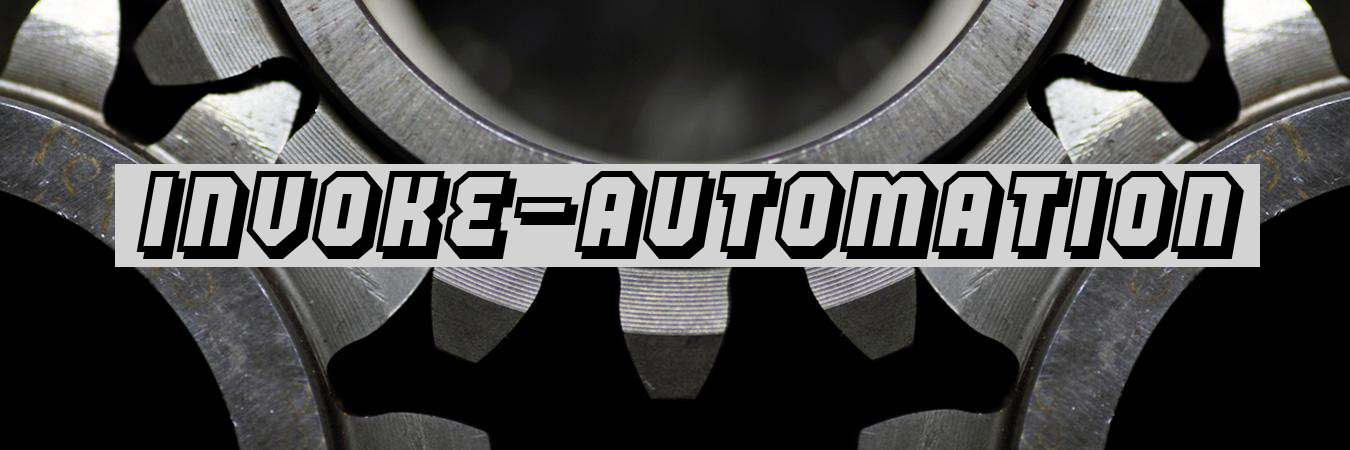
<style>
.page{position:relative;width:1350px;height:450px;background:#000000}
.page>*{position:absolute;margin:0}
.t1{font:96px "HangtheDJ";color:#000000}
</style>
<div class="page">
<p class="t1" style="left:136px;top:171px;width:1108px;height:88px">Invoke-Automation</p>
</div>
